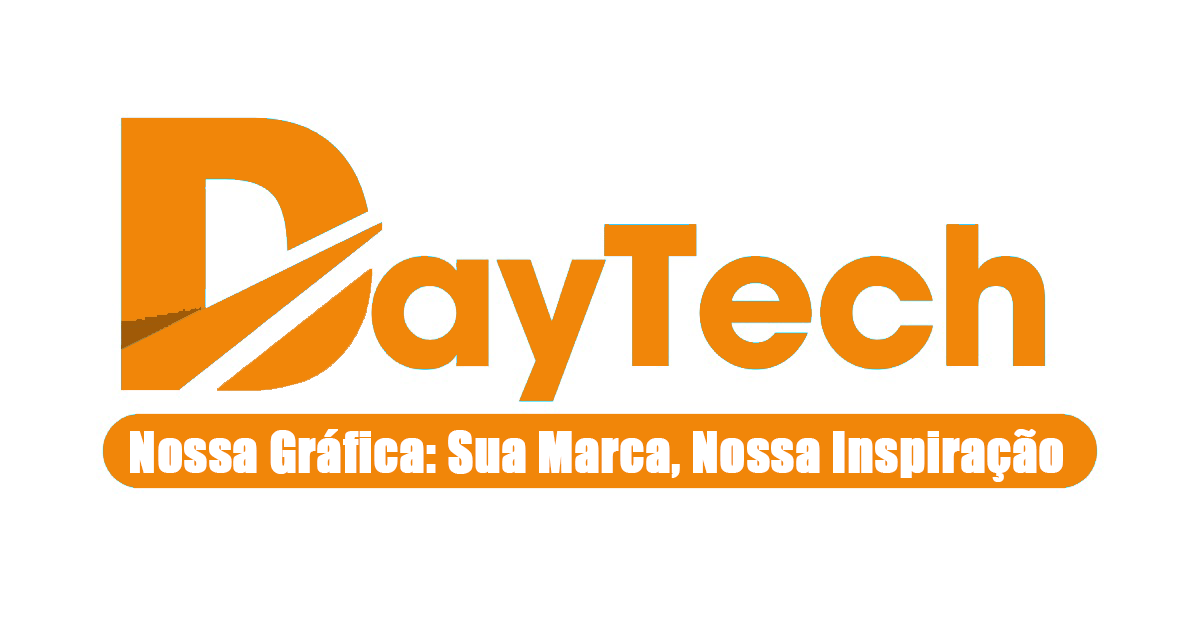
<style>
.page{position:relative;width:1200px;height:630px;background:#ffffff}
.page>*{position:absolute;margin:0}
.t1{font:51.7px "Impact";color:#ffffff;font-weight:bold;scale:0.96 1}
</style>
<div class="page">
<p class="t1" style="left:130px;top:429px;width:933px;height:53px">Nossa Gráfica: Sua Marca, Nossa Inspiração</p>
</div>
